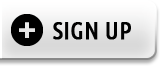
<style>
.page{position:relative;width:160px;height:66px}
.page>*{position:absolute;margin:0}
.t1{font:25px "UbuntuCondensed-Regular";color:#010101;font-weight:bold}
</style>
<div class="page">
<p class="t1" style="left:53px;top:22px;width:78px;height:18px">SIGN UP</p>
</div>
